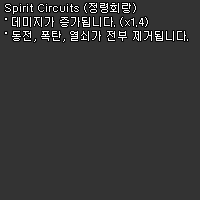
<style>
.page{position:relative;width:200px;height:200px;background:#333333}
.page>*{position:absolute;margin:0}
.t1{font:11px/14px "Dotum";color:#ffffff}
</style>
<div class="page">
<p class="t1" style="left:5px;top:3px;width:183px;height:39px">Spirit Circuits (정령회랑)<br>˚ 데미지가 증가됩니다. (x1.4)<br>˚ 동전, 폭탄, 열쇠가 전부 제거됩니다.</p>
</div>
